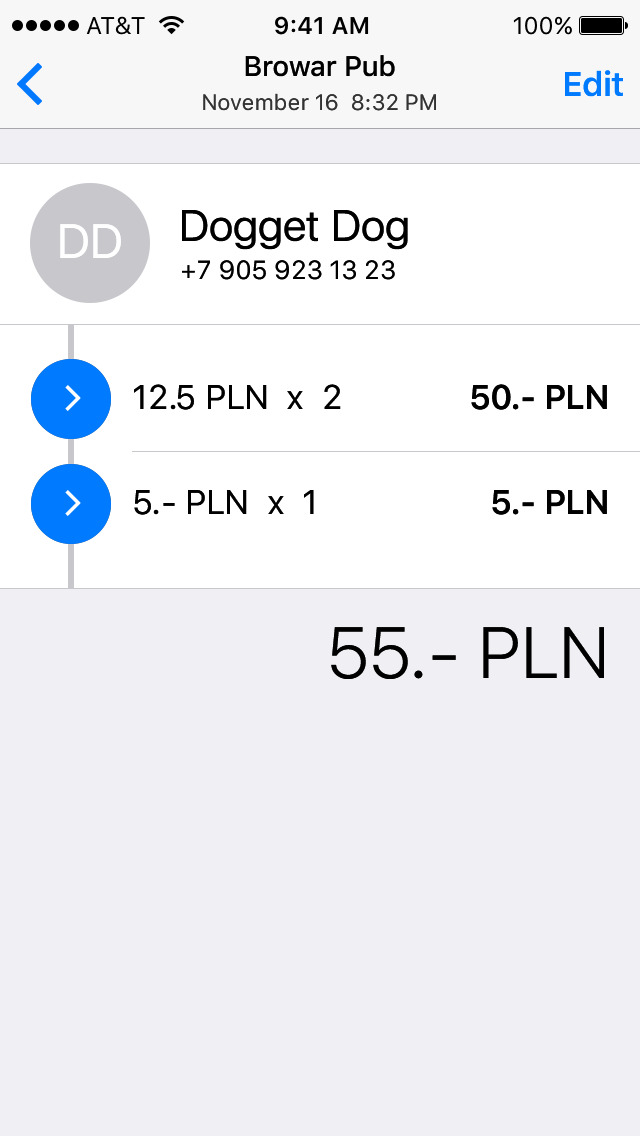
<style>
.page{position:relative;width:640px;height:1136px;background:#efeff4}
.page>*{position:absolute;margin:0}
.t1{font:28px "SFUIText-Medium";letter-spacing:-0.01em;color:#000000}
.t2{font:34px "SFUIText-Semibold";letter-spacing:-0.025em;color:#007aff}
.t3{font:22px "SFUIText-Regular";color:#333333}
.t4{font:44px "SFUIDisplay-Regular";color:#000000}
.t5{font:48px "SFUIDisplay-Regular";color:#ffffff}
.t6{font:26px "SFUIText-Regular";letter-spacing:-0.005em;color:#000000}
.t7{font:34px "SFUIText-Regular";letter-spacing:-0.025em;color:#000000}
.t8{font:34px "SFUIText-Semibold";letter-spacing:-0.025em;color:#000000}
.t9{font:72px "SFUIText-Light";letter-spacing:-0.025em;color:#000000}
</style>
<div class="page">
<p class="t1" style="left:245px;top:55px;width:150px;height:22px">Browar Pub</p>
<p class="t2" style="left:565px;top:70px;width:58px;height:27px">Edit</p>
<p class="t3" style="left:203px;top:93px;width:233px;height:18px">November 16  8:32 PM</p>
<p class="t4" style="left:182px;top:210px;width:226px;height:40px">Dogget Dog</p>
<p class="t5" style="left:60px;top:224px;width:61px;height:34px">DD</p>
<p class="t6" style="left:182px;top:260px;width:213px;height:20px">+7 905 923 13 23</p>
<p class="t7" style="left:134px;top:384px;width:207px;height:26px">12.5 PLN  x  2</p>
<p class="t8" style="left:471px;top:384px;width:136px;height:26px">50.- PLN</p>
<p class="t7" style="left:134px;top:490px;width:180px;height:25px">5.- PLN  x  1</p>
<p class="t8" style="left:492px;top:490px;width:115px;height:25px">5.- PLN</p>
<p class="t9" style="left:331px;top:627px;width:273px;height:52px">55.- PLN</p>
</div>
